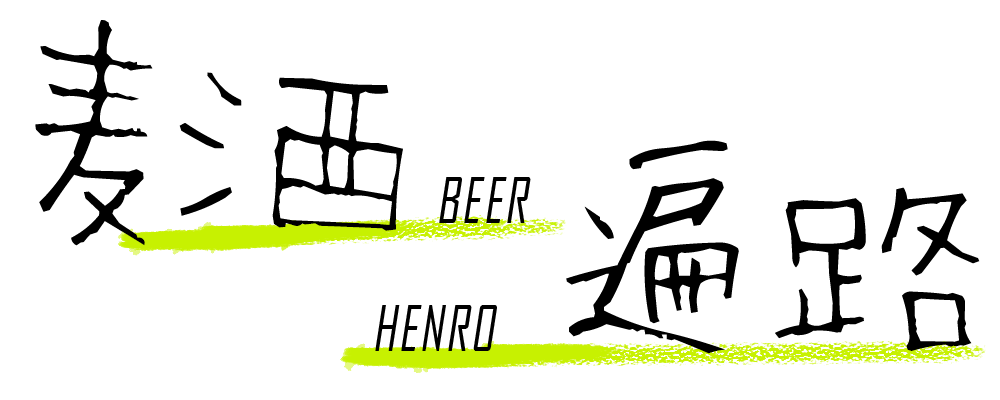
<style>
.page{position:relative;width:1000px;height:400px;background:#ffffff}
.page>*{position:absolute;margin:0}
.t1{font:230px "ShigotoMemogaki";color:#000000}
.t2{font:230px "ShigotoMemogaki";letter-spacing:-0.025em;color:#000000}
.t3{font:220px "ShigotoMemogaki";color:#000000}
.t4{font:60px "AgencyFB-Reg";letter-spacing:0.05em;color:#000000;font-style:italic;scale:0.88 1}
.t5{font:210px "ShigotoMemogaki";color:#000000}
</style>
<div class="page">
<p class="t1" style="left:35px;top:20px;width:368px;height:226px;rotate:5deg">麦<span class="t2">酒</span></p>
<p class="t3" style="left:566px;top:140px;width:173px;height:214px">遍</p>
<p class="t4" style="left:439px;top:177px;width:92px;height:46px">BEER</p>
<p class="t5" style="left:775px;top:187px;width:205px;height:164px;rotate:-5deg">路</p>
<p class="t4" style="left:375px;top:305px;width:122px;height:46px">HENRO</p>
</div>
